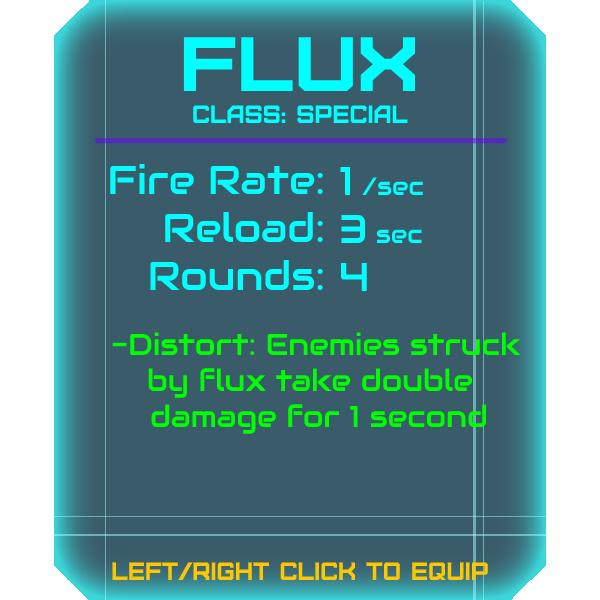
<style>
.page{position:relative;width:600px;height:600px;background:#3a5c6a}
.page>*{position:absolute;margin:0}
.t1{font:76.8px "Furore";color:#00ffff;scale:1.13 1}
.t2{font:25px "Furore";color:#00ffff}
.t3{font:40px "Audiowide-Regular";color:#00ffff}
.t4{font:25px "Audiowide-Regular";color:#00ffff}
.t5{font:30px "Audiowide-Regular";color:#00ff00}
.t6{font:25px "Furore";color:#ffc700}
</style>
<div class="page">
<p class="t1" style="left:183px;top:37px;width:232px;height:54px">Flux</p>
<p class="t2" style="left:193px;top:105px;width:215px;height:18px">Class: Special</p>
<p class="t3" style="left:110px;top:163px;width:213px;height:127px;text-align:right">Fire Rate:<br>Reload:<br>Rounds:</p>
<p class="t4" style="left:340px;top:166px;width:83px;height:125px"><span class="t3">1 </span>/sec<br><span class="t3">3 </span>sec<br><span class="t3">4</span></p>
<p class="t5" style="left:112px;top:332px;width:409px;height:66px">-Distort: Enemies struck<br> by f</p>
<p class="t5" style="left:151px;top:368px;width:336px;height:66px">lux take double<br>damage for 1 second</p>
<p class="t6" style="left:112px;top:562px;width:376px;height:18px">left/right click to equip</p>
</div>
